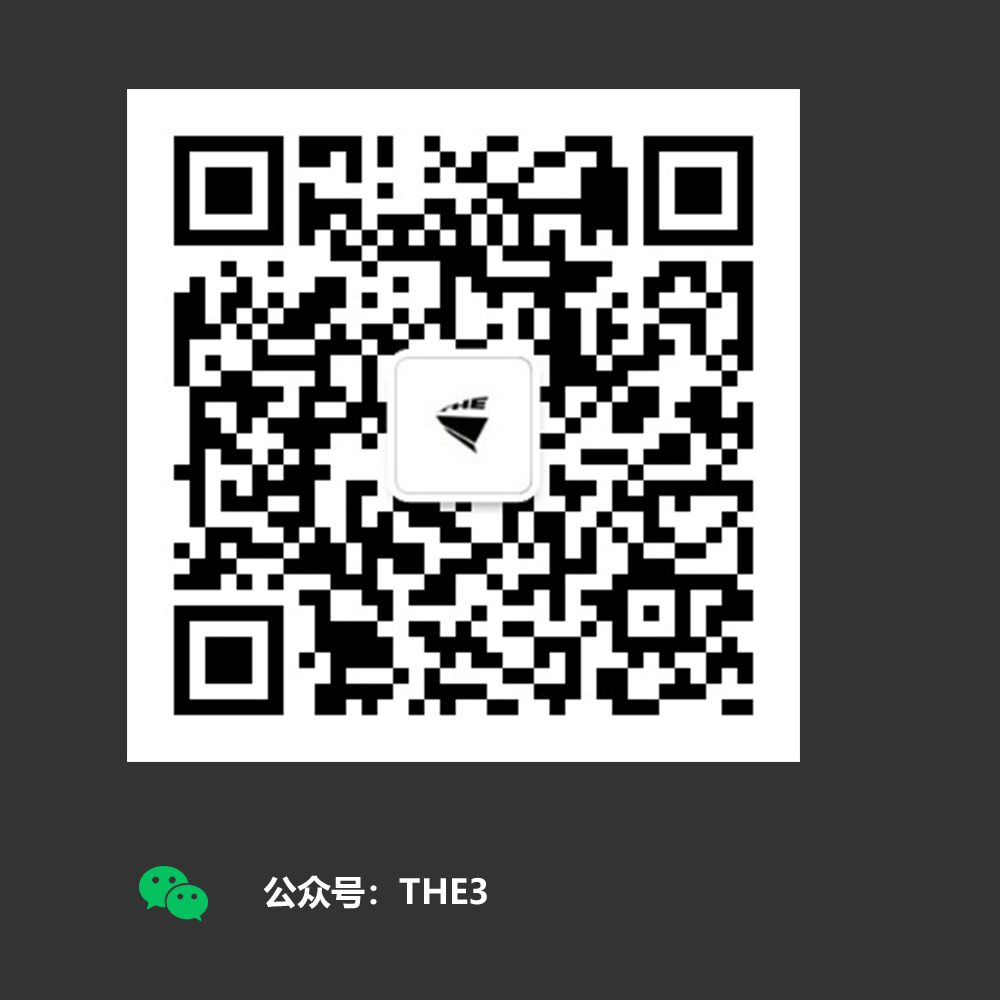
<style>
.page{position:relative;width:1000px;height:1000px;background:#333333}
.page>*{position:absolute;margin:0}
.t1{font:34px "MicrosoftYaHei-Bold";color:#ffffff}
</style>
<div class="page">
<p class="t1" style="left:263px;top:875px;width:224px;height:34px">公众号：THE3</p>
</div>
